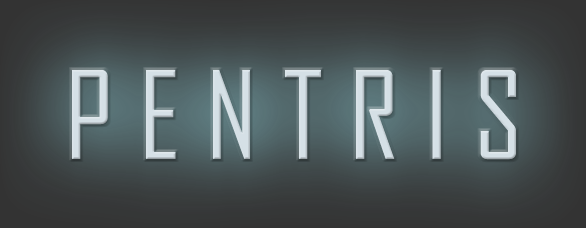
<style>
.page{position:relative;width:586px;height:228px}
.page>*{position:absolute;margin:0}
.t1{font:117px "AgencyFB-Reg";letter-spacing:0.22em;color:#d5e0e6}
</style>
<div class="page">
<p class="t1" style="left:72px;top:70px;width:444px;height:90px">PENTRIS</p>
</div>
